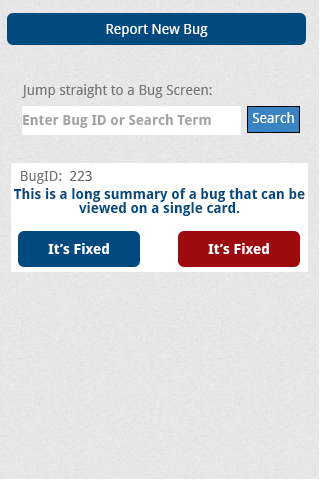
<style>
.page{position:relative;width:320px;height:480px}
.page>*{position:absolute;margin:0}
.t1{font:14px "DroidSans";color:#ffffff}
.t2{font:14px "DroidSans";color:#767676}
.t3{font:14px "DroidSans-Bold";color:#a3a3a3}
.t4{font:14px "DroidSans";color:#676767}
.t5{font:14px/14px "DroidSans-Bold";color:#004a80}
.t6{font:14px "DroidSans-Bold";color:#ffffff}
</style>
<div class="page">
<p class="t1" style="left:106px;top:24px;width:102px;height:13px">Report New Bug</p>
<p class="t2" style="left:21px;top:84px;width:191px;height:14px">Jump straight to a Bug Screen:</p>
<p class="t1" style="left:252px;top:112px;width:42px;height:11px">Search</p>
<p class="t3" style="left:23px;top:114px;width:188px;height:14px">Enter Bug ID or Search Term</p>
<p class="t2" style="left:21px;top:171px;width:41px;height:13px">BugID:</p>
<p class="t4" style="left:70px;top:171px;width:22px;height:10px">223</p>
<p class="t5" style="left:13px;top:188px;width:292px;height:28px;text-align:center">This is a long summary of a bug that can be viewed on a single card.</p>
<p class="t6" style="left:48px;top:243px;width:61px;height:11px">It’s Fixed</p>
<p class="t6" style="left:208px;top:243px;width:61px;height:11px">It’s Fixed</p>
</div>
